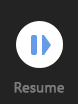
<style>
.page{position:relative;width:78px;height:104px;background:#232323}
.page>*{position:absolute;margin:0}
.t1{font:14px "SegoeUI";color:#7c7c7c;font-weight:bold}
</style>
<div class="page">
<p class="t1" style="left:14px;top:82px;width:50px;height:11px">Resume</p>
</div>
